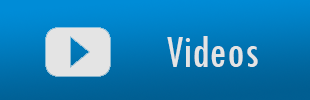
<style>
.page{position:relative;width:310px;height:100px}
.page>*{position:absolute;margin:0}
.t1{font:48px "TwCenMT-Condensed";color:#e4e4e4}
</style>
<div class="page">
<p class="t1" style="left:167px;top:36px;width:91px;height:31px">Videos</p>
</div>
